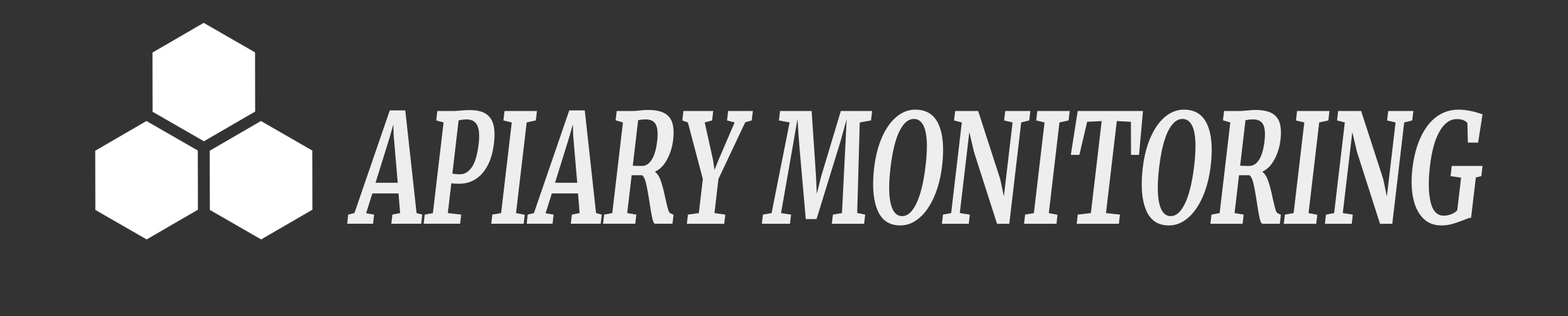
<style>
.page{position:relative;width:1568px;height:316px;background:#333333}
.page>*{position:absolute;margin:0}
.t1{font:151.7px "Merriweather-Bold";color:#eeeeee;font-style:italic;scale:0.67 1}
</style>
<div class="page">
<p class="t1" style="left:347px;top:109px;width:1136px;height:117px">APIARY MONITORING</p>
</div>
